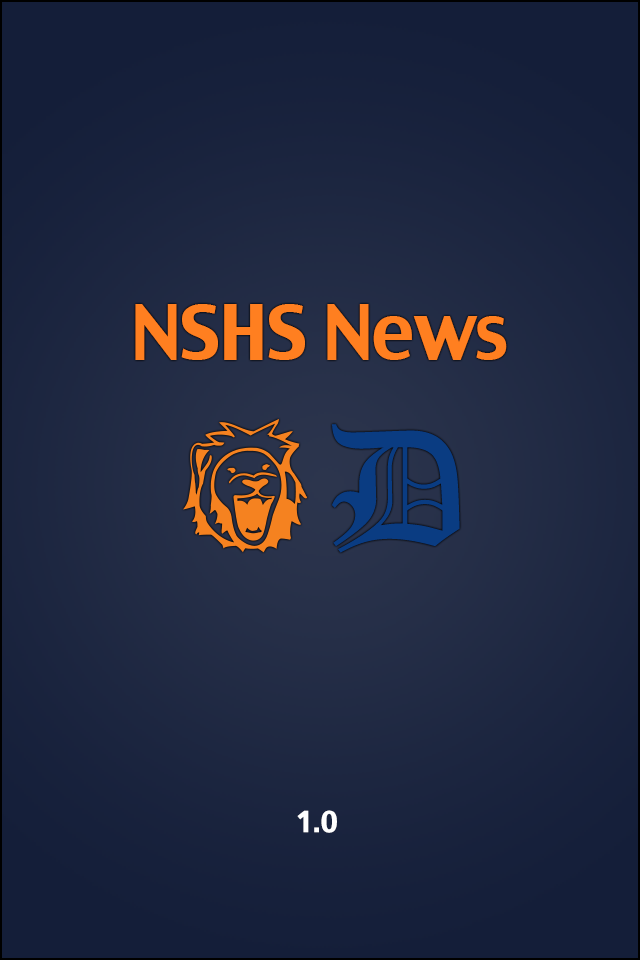
<style>
.page{position:relative;width:640px;height:960px}
.page>*{position:absolute;margin:0}
.t1{font:72.9px "CharcoalCY";letter-spacing:-0.02em;color:#ff7f20}
.t2{font:167.6px "OldEnglishTextMT";color:#0a3c82}
.t3{font:28.2px "CharcoalCY";color:#ffffff}
</style>
<div class="page">
<p class="t1" style="left:135px;top:304px;width:372px;height:56px">NSHS News</p>
<p class="t2" style="left:332px;top:424px;width:128px;height:129px">D</p>
<p class="t3" style="left:297px;top:810px;width:40px;height:23px">1.0</p>
</div>
